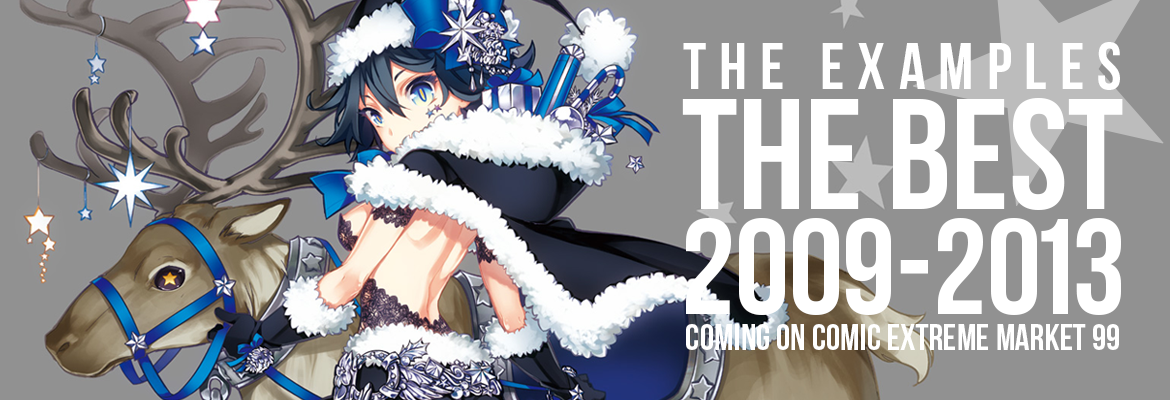
<style>
.page{position:relative;width:1170px;height:400px;background:#919191}
.page>*{position:absolute;margin:0}
.t1{font:65.1px "BebasNeue";letter-spacing:0.2em;color:#ffffff}
.t2{font:157.5px "BebasNeue";color:#ffffff}
.t3{font:135.5px "BebasNeue";color:#ffffff}
.t4{font:36.1px "BebasNeue";color:#ffffff}
</style>
<div class="page">
<p class="t1" style="left:683px;top:42px;width:437px;height:48px">THE EXAMPLES</p>
<p class="t2" style="left:682px;top:98px;width:441px;height:112px">THE BEST</p>
<p class="t3" style="left:686px;top:218px;width:435px;height:97px">2009-2013</p>
<p class="t4" style="left:686px;top:324px;width:433px;height:26px">COMING ON COMIC EXTREME MARKET 99</p>
</div>
